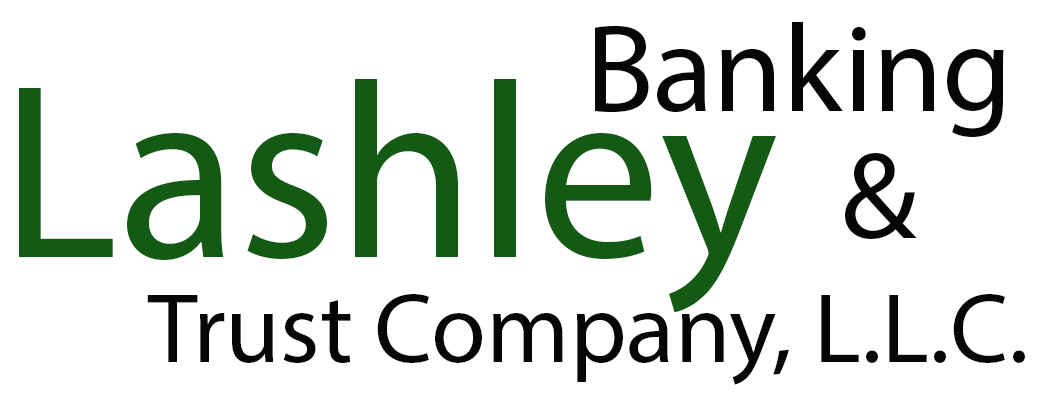
<style>
.page{position:relative;width:1040px;height:400px;background:#ffffff}
.page>*{position:absolute;margin:0}
.t1{font:125px "MyriadPro-Regular";color:#050605}
.t2{font:250px "MyriadPro-Regular";color:#135a15}
.t3{font:100px "MyriadPro-Regular";color:#050605}
</style>
<div class="page">
<p class="t1" style="left:595px;top:22px;width:409px;height:116px">Banking</p>
<p class="t2" style="left:19px;top:79px;width:757px;height:234px">Lashley</p>
<p class="t1" style="left:845px;top:153px;width:72px;height:86px">&amp;</p>
<p class="t3" style="left:147px;top:294px;width:878px;height:91px">Trust Company, L.L.C.</p>
</div>
